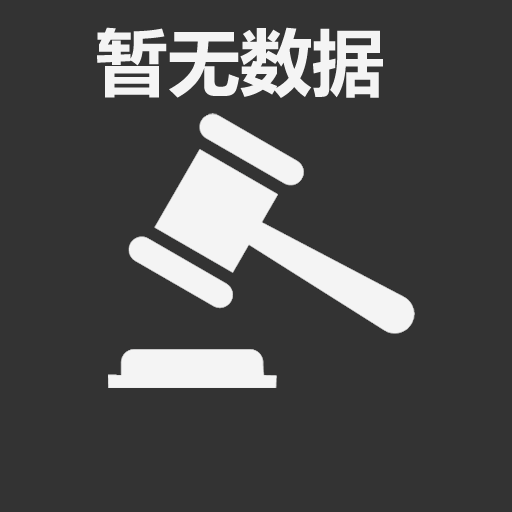
<style>
.page{position:relative;width:512px;height:512px;background:#333333}
.page>*{position:absolute;margin:0}
.t1{font:72px "MicrosoftYaHei-Bold";color:#f4f4f4}
</style>
<div class="page">
<p class="t1" style="left:97px;top:27px;width:286px;height:71px">暂无数据</p>
</div>
